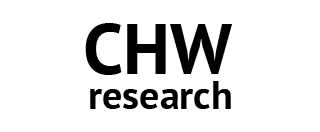
<style>
.page{position:relative;width:320px;height:132px;background:#ffffff}
.page>*{position:absolute;margin:0}
.t1{font:72px "PTSans-Bold";color:#000000}
.t2{font:40px "PTSans-Bold";color:#000000}
</style>
<div class="page">
<p class="t1" style="left:85px;top:23px;width:148px;height:52px">CHW</p>
<p class="t2" style="left:90px;top:81px;width:141px;height:28px">research</p>
</div>
